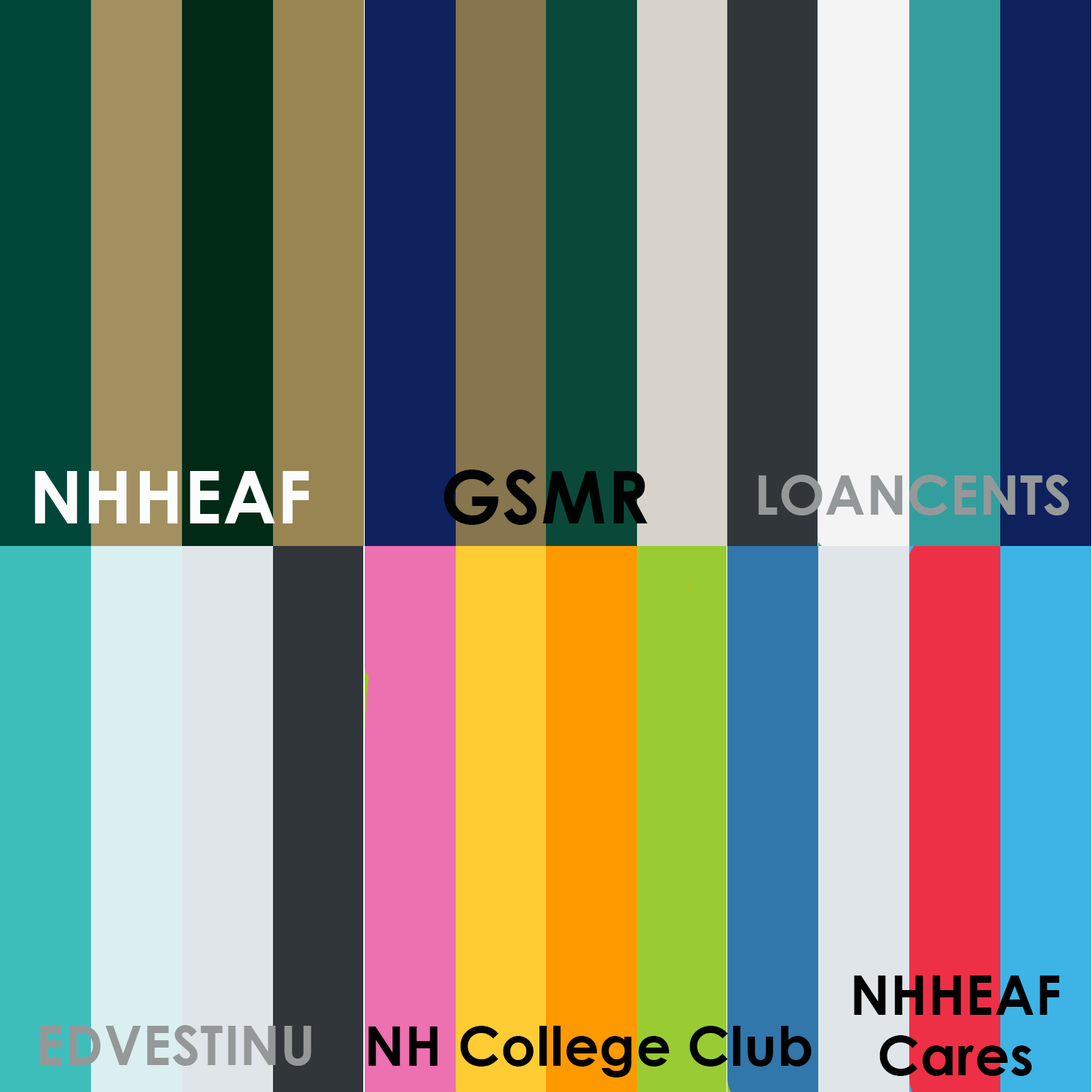
<style>
.page{position:relative;width:1092px;height:1092px}
.page>*{position:absolute;margin:0}
.t1{font:72.8px "CenturyGothic-Bold";letter-spacing:0.01em;color:#fbfcfc}
.t2{font:72.8px "CenturyGothic-Bold";letter-spacing:0.01em;color:#000304}
.t3{font:54.6px/60.7px "CenturyGothic-Bold";letter-spacing:0.01em;color:#000203}
.t4{font:54.6px "CenturyGothic-Bold";letter-spacing:0.01em;color:#959899}
.t5{font:54.6px "CenturyGothic-Bold";letter-spacing:0.01em;color:#000101}
</style>
<div class="page">
<p class="t1" style="left:35px;top:471px;width:274px;height:52px">NHHEAF</p>
<p class="t2" style="left:444px;top:470px;width:204px;height:55px">GSMR</p>
<p class="t3" style="left:854px;top:976px;width:205px;height:100px;text-align:center">NHHEAF<br>Cares</p>
<p class="t4" style="left:40px;top:1025px;width:272px;height:41px">EDVESTINU</p>
<p class="t5" style="left:368px;top:1026px;width:444px;height:51px">NH College Club</p>
</div>
